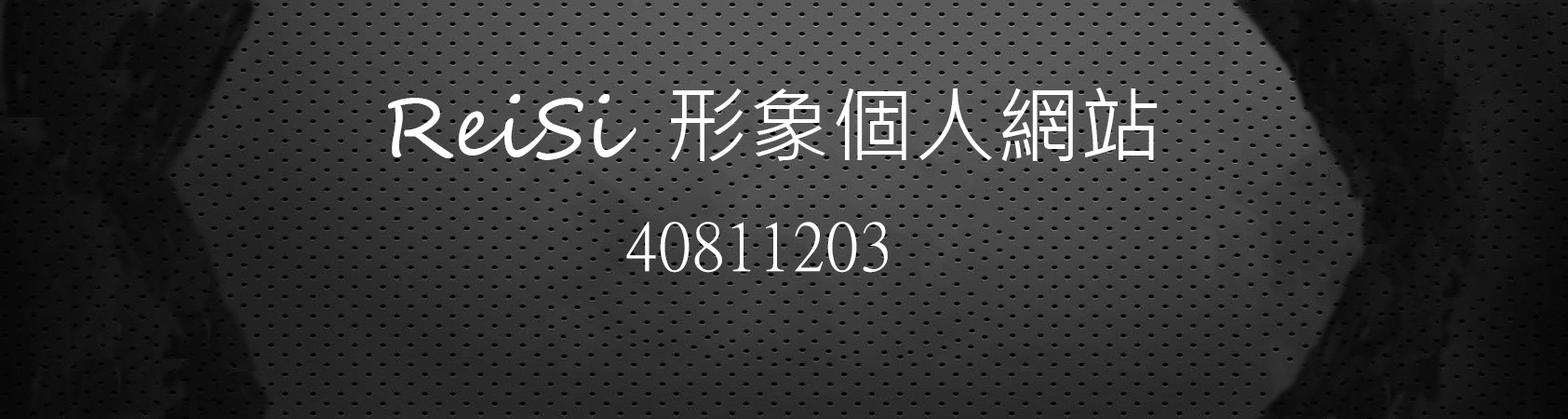
<style>
.page{position:relative;width:1568px;height:419px}
.page>*{position:absolute;margin:0}
.t1{font:82.8px "MicrosoftJhengHeiRegular";color:#ffffff}
.t2{font:82.8px "SegoeScript";color:#ffffff}
.t3{font:67px "MingLiU";color:#ffffff}
</style>
<div class="page">
<p class="t1" style="left:388px;top:87px;width:770px;height:74px"><span class="t2">ReiSi </span>形象個人網站</p>
<p class="t3" style="left:626px;top:221px;width:262px;height:52px">40811203</p>
</div>
